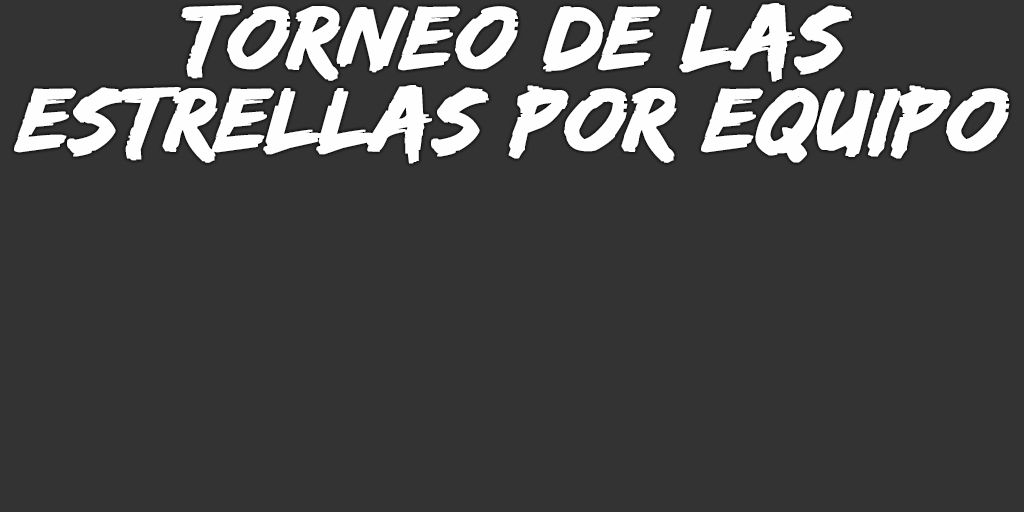
<style>
.page{position:relative;width:1024px;height:512px;background:#333333}
.page>*{position:absolute;margin:0}
.t1{font:93px/82px "EdoSZ";color:#fefefe;font-weight:bold;font-style:italic;scale:1.04 1}
</style>
<div class="page">
<p class="t1" style="left:14px;top:3px;width:996px;height:161px;text-align:center">torneo de las<br>estrellas por equipo</p>
</div>
